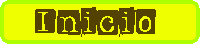
<style>
.page{position:relative;width:200px;height:44px;background:#f0ff00}
.page>*{position:absolute;margin:0}
.t1{font:31.1px "BadlyStamped";letter-spacing:0.005em;color:#534100}
</style>
<div class="page">
<p class="t1" style="left:35px;top:7px;width:121px;height:30px">Inicio</p>
</div>
